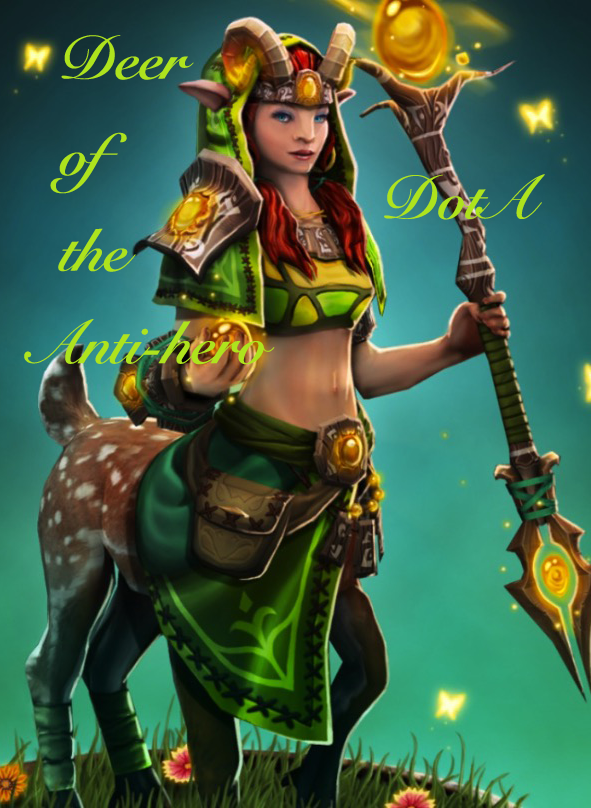
<style>
.page{position:relative;width:591px;height:808px}
.page>*{position:absolute;margin:0}
.t1{font:60px/48px "SnellRoundhand-Bold";letter-spacing:-0.01em;color:#aee31d}
.t2{font:60px "SnellRoundhand-Bold";letter-spacing:-0.01em;color:#aee31d}
</style>
<div class="page">
<p class="t1" style="left:50px;top:35px;width:144px;height:237px">Deer<br> <br>of <br><br>the</p>
<p class="t2" style="left:384px;top:174px;width:161px;height:46px">DotA</p>
<p class="t2" style="left:24px;top:319px;width:251px;height:46px">Anti-hero</p>
</div>
